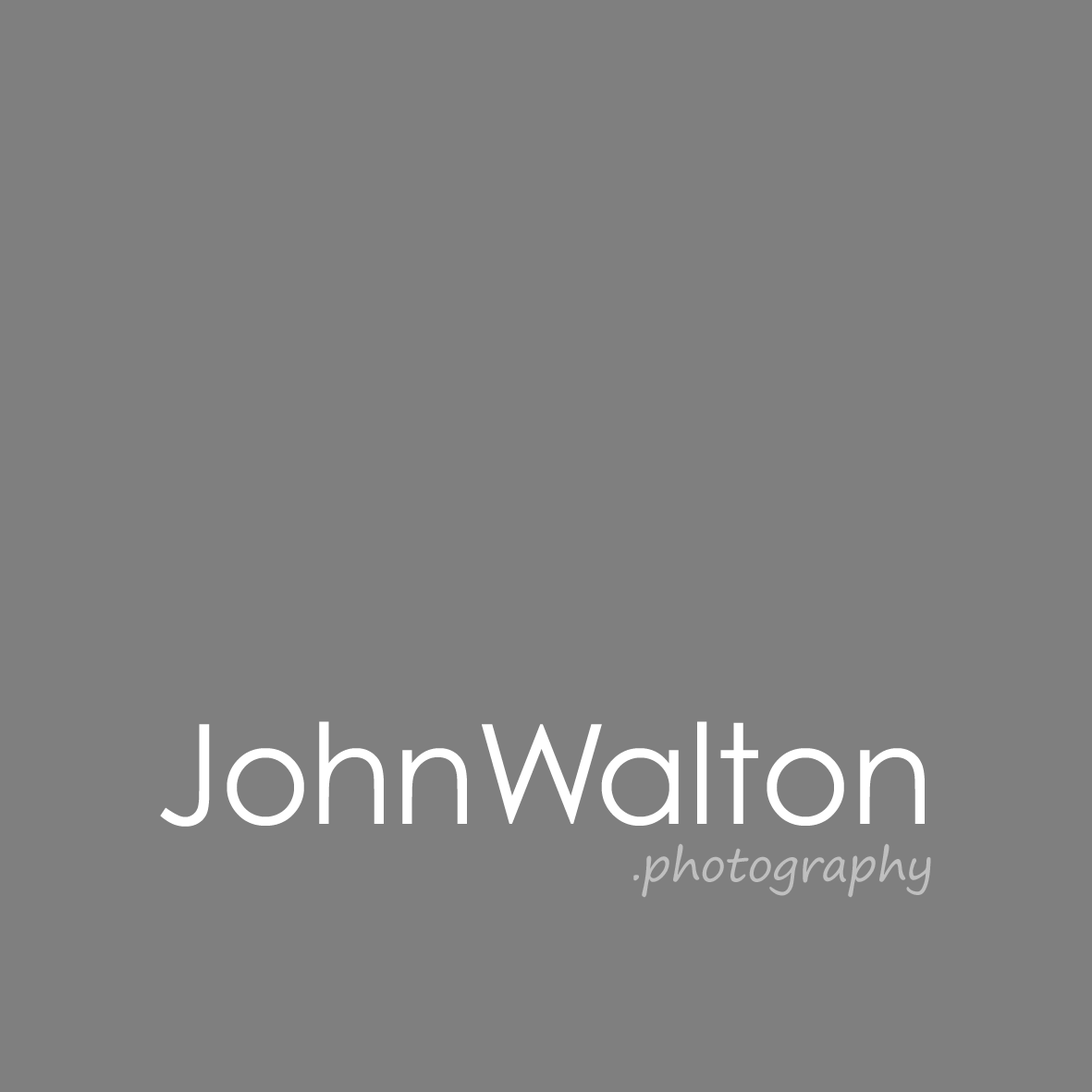
<style>
.page{position:relative;width:1092px;height:1092px;background:#7f7f7f}
.page>*{position:absolute;margin:0}
.t1{font:138.7px "CenturyGothic";letter-spacing:-0.01em;color:#ffffff}
.t2{font:138.7px "CenturyGothic";letter-spacing:-0.1em;color:#ffffff}
.t3{font:46.2px "SegoePrint";letter-spacing:-0.01em;color:#bfbfbf}
</style>
<div class="page">
<p class="t1" style="left:160px;top:721px;width:765px;height:106px">John<span class="t2">W</span>alton</p>
<p class="t3" style="left:633px;top:843px;width:298px;height:55px">.photography</p>
</div>
